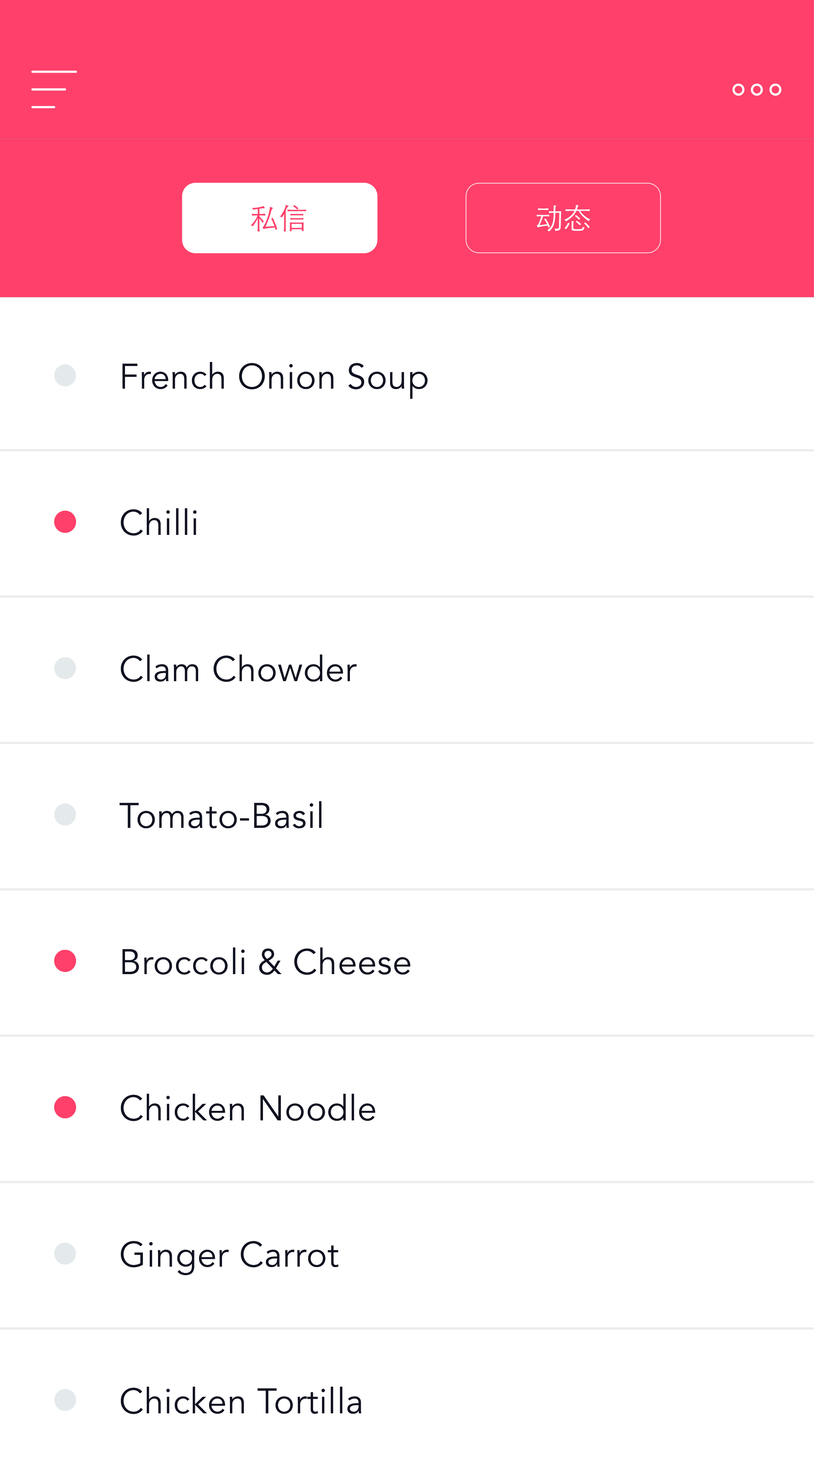
<style>
.page{position:relative;width:814px;height:1466px;background:#ffffff}
.page>*{position:absolute;margin:0}
.t1{font:28.6px "STHeitiSC-Light";letter-spacing:0.015em;color:#fe406a}
.t2{font:28.6px "STHeitiSC-Light";letter-spacing:0.015em;color:#ffffff}
.t3{font:35.2px "Avenir-Book";letter-spacing:0.015em;color:#0e111f}
</style>
<div class="page">
<p class="t1" style="left:251px;top:205px;width:55px;height:26px">私信</p>
<p class="t2" style="left:536px;top:205px;width:54px;height:26px">动态</p>
<p class="t3" style="left:122px;top:362px;width:305px;height:37px">French Onion Soup</p>
<p class="t3" style="left:121px;top:508px;width:75px;height:28px">Chilli</p>
<p class="t3" style="left:121px;top:654px;width:236px;height:28px">Clam Chowder</p>
<p class="t3" style="left:120px;top:801px;width:201px;height:27px">Tomato-Basil</p>
<p class="t3" style="left:122px;top:947px;width:288px;height:28px">Broccoli &amp; Cheese</p>
<p class="t3" style="left:121px;top:1093px;width:254px;height:28px">Chicken Noodle</p>
<p class="t3" style="left:121px;top:1241px;width:217px;height:34px">Ginger Carrot</p>
<p class="t3" style="left:121px;top:1386px;width:240px;height:28px">Chicken Tortilla</p>
</div>
